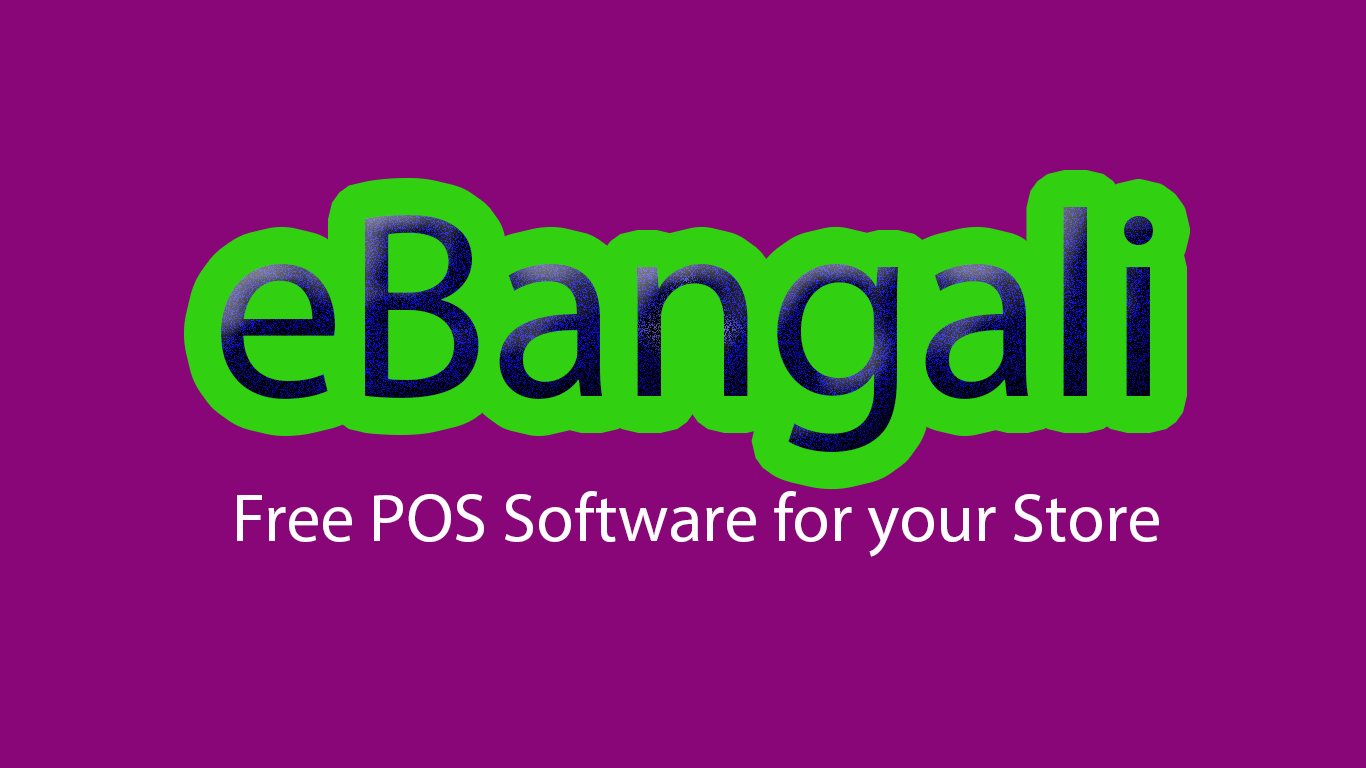
<style>
.page{position:relative;width:1366px;height:768px;background:#890678}
.page>*{position:absolute;margin:0}
.t1{font:266.4px "MyriadPro-Regular"}
.t2{font:68.8px "MyriadPro-Regular";color:#fefcfe}
</style>
<div class="page">
<p class="t1" style="left:221px;top:207px;width:932px;height:246px">eBangali</p>
<p class="t2" style="left:237px;top:491px;width:922px;height:66px">Free POS Software for your Store</p>
</div>
